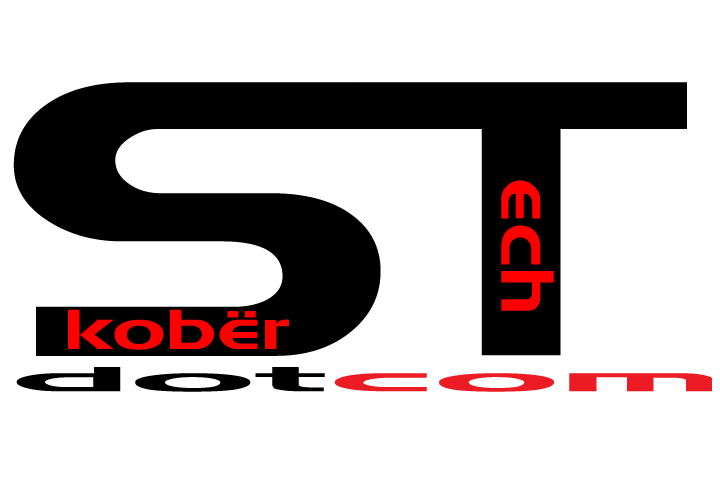
<style>
.page{position:relative;width:720px;height:480px;background:#ffffff}
.page>*{position:absolute;margin:0}
.t1{font:390.6px "Denmark";color:#000000;scale:1.24 1}
.t2{font:75px "Denmark";color:#ff0000;scale:1.09 1}
.t3{font:56.2px "Denmark";color:#ff0000;scale:1.46 1}
.t4{font:34.2px "Denmark";color:#000000;scale:5.6 1}
.t5{font:34.2px "Denmark";color:#ed1c24;scale:5.6 1}
</style>
<div class="page">
<p class="t1" style="left:13px;top:82px;width:368px;height:274px">S</p>
<p class="t1" style="left:357px;top:82px;width:330px;height:274px">T</p>
<p class="t2" style="left:501px;top:180px;width:53px;height:131px;rotate:90deg">ech</p>
<p class="t3" style="left:68px;top:309px;width:221px;height:41px">kobër</p>
<p class="t4" style="left:16px;top:367px;width:696px;height:25px">dot<span class="t5">com</span></p>
</div>
